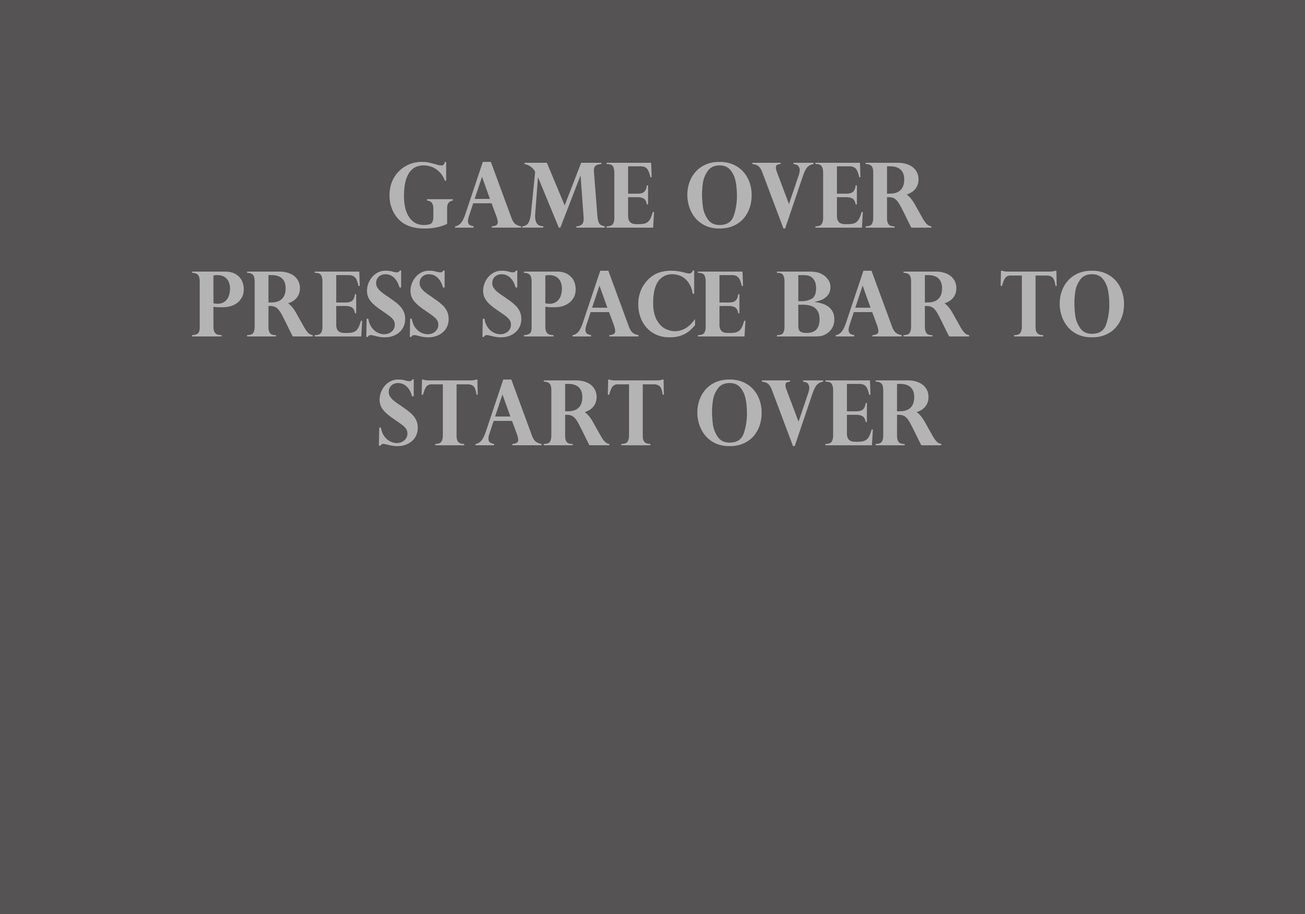
<style>
.page{position:relative;width:1305px;height:914px;background:#555353}
.page>*{position:absolute;margin:0}
.t1{font:90.6px "PerpetuaTitlingMT-Bold";color:#b4b4b4;scale:0.94 1}
</style>
<div class="page">
<p class="t1" style="left:192px;top:162px;width:932px;height:284px;text-align:center">Game Over <br>Press space bar to<br>Start over</p>
</div>
